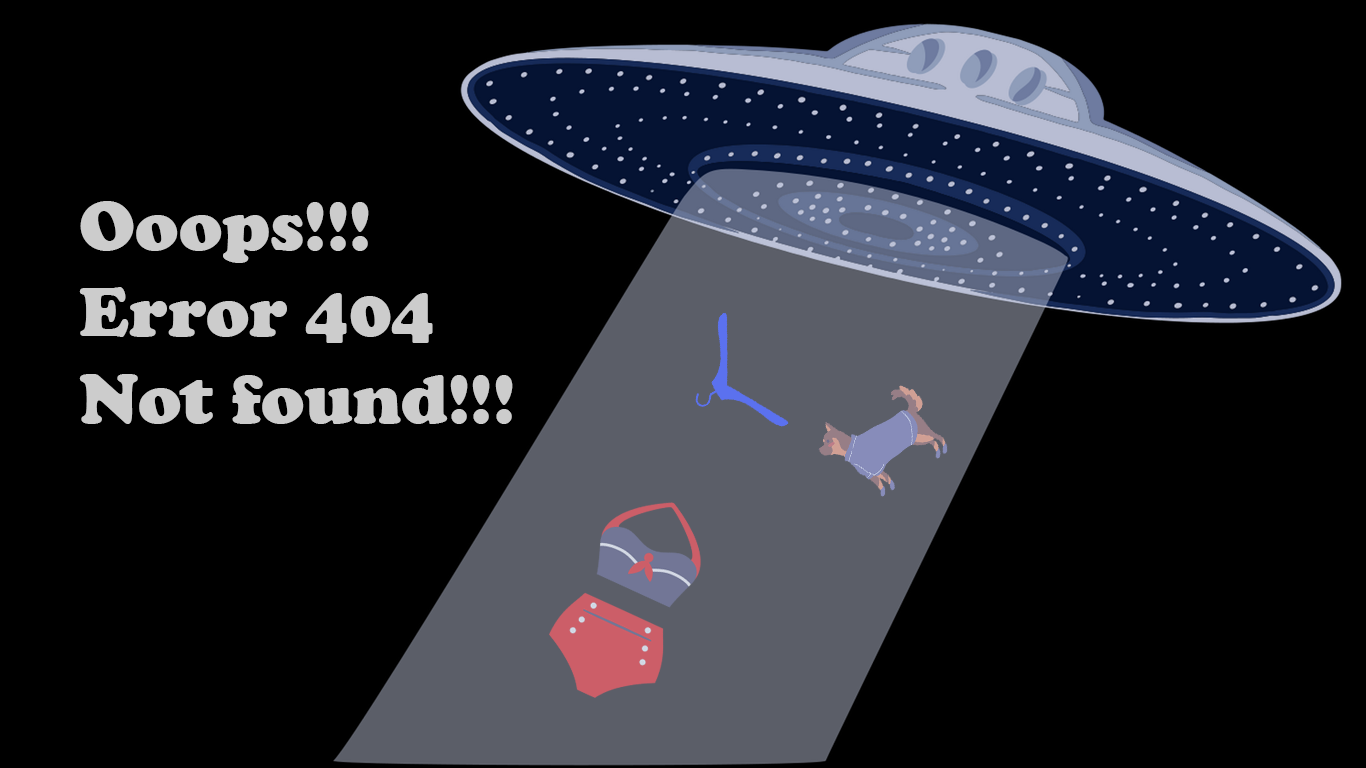
<style>
.page{position:relative;width:1366px;height:768px;background:#000000}
.page>*{position:absolute;margin:0}
.t1{font:72px "CooperBlack";color:#cccccc}
</style>
<div class="page">
<p class="t1" style="left:79px;top:201px;width:434px;height:223px">Ooops!!!<br>Error 404<br>Not found!!!</p>
</div>
